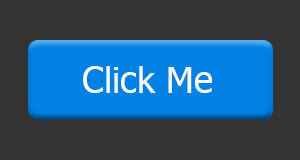
<style>
.page{position:relative;width:300px;height:160px;background:#333333}
.page>*{position:absolute;margin:0}
.t1{font:36px "Tahoma";color:#ffffff}
</style>
<div class="page">
<p class="t1" style="left:83px;top:66px;width:129px;height:27px">Click Me</p>
</div>
